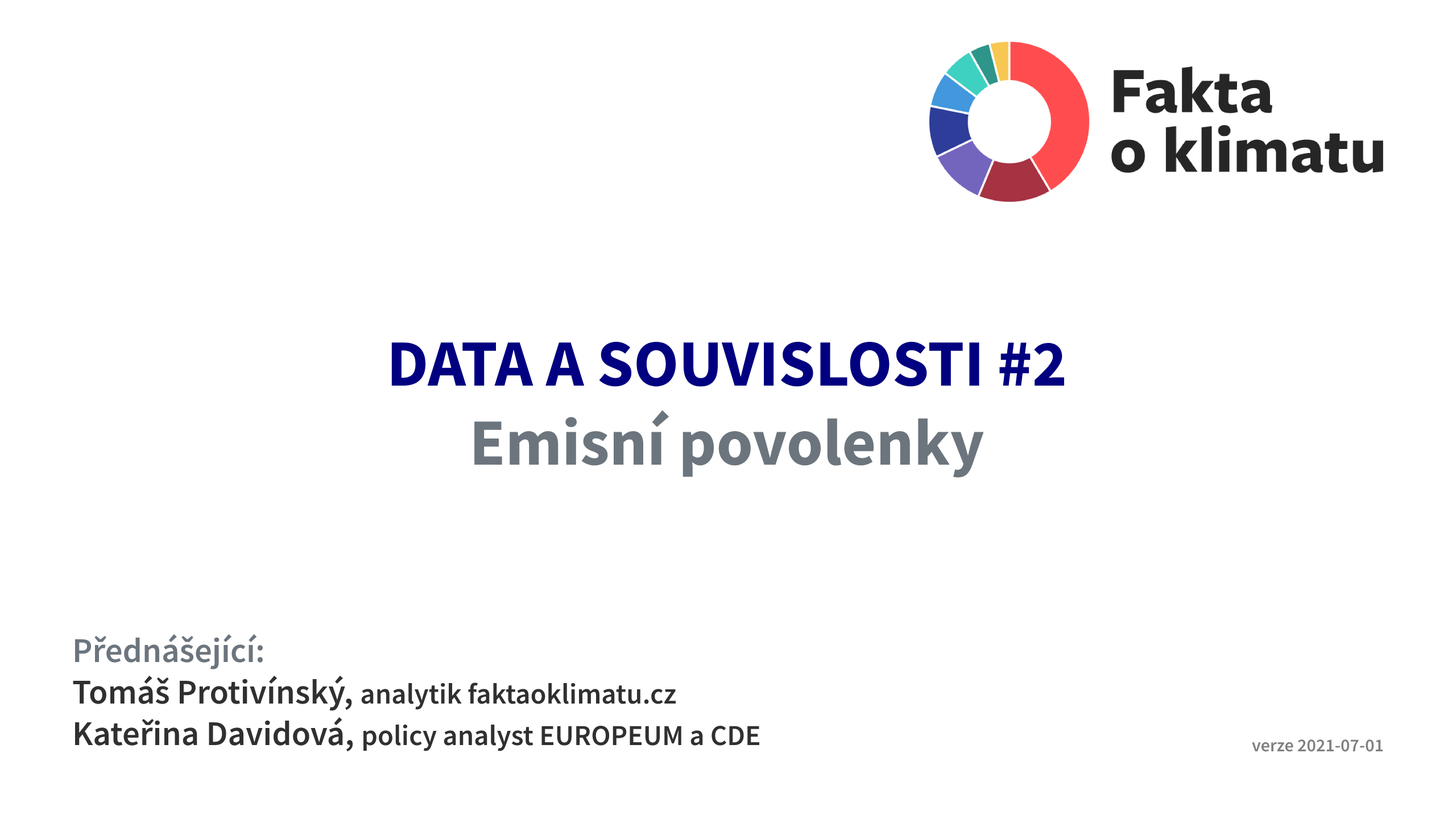
<style>
.page{position:relative;width:1456px;height:819px;background:#ffffff}
.page>*{position:absolute;margin:0}
.t1{font:66px "SourceSansPro-Bold";color:#000080}
.t2{font:66px "SourceSansPro-Bold";color:#6c757d}
.t3{font:29px "SourceSansPro-Semibold";color:#303030}
.t4{font:34.7px "SourceSansPro-Semibold";color:#6c757d}
.t5{font:34.7px "SourceSansPro-Semibold";color:#303030}
.t6{font:18.2px "SourceSansPro-Semibold";color:#808080}
</style>
<div class="page">
<p class="t1" style="left:391px;top:341px;width:673px;height:137px;text-align:center">DATA A SOUVISLOSTI #2<br><span class="t2">Emisní povolenky</span></p>
<p class="t3" style="left:73px;top:634px;width:686px;height:118px"><span class="t4">Přednášející:<br></span><span class="t5">Tomáš Protivínský, </span>analytik faktaoklimatu.cz<br><span class="t5">Kateřina Davidová, </span>policy analyst EUROPEUM a CDE</p>
<p class="t6" style="left:1252px;top:739px;width:131px;height:13px">verze 2021-07-01</p>
</div>
